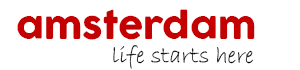
<style>
.page{position:relative;width:300px;height:70px;background:#ffffff}
.page>*{position:absolute;margin:0}
.t1{font:36px "COCOGOOSE";color:#c50000}
.t2{font:24px "BradleyHandITC";color:#000000}
</style>
<div class="page">
<p class="t1" style="left:17px;top:9px;width:238px;height:31px">amsterdam</p>
<p class="t2" style="left:113px;top:45px;width:140px;height:24px">life starts here</p>
</div>
